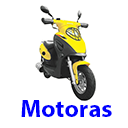
<style>
.page{position:relative;width:128px;height:128px;background:#ffffff}
.page>*{position:absolute;margin:0}
.t1{font:25px "MyriadPro-Bold";color:#0000ff}
</style>
<div class="page">
<p class="t1" style="left:21px;top:100px;width:91px;height:17px">Motoras</p>
</div>
